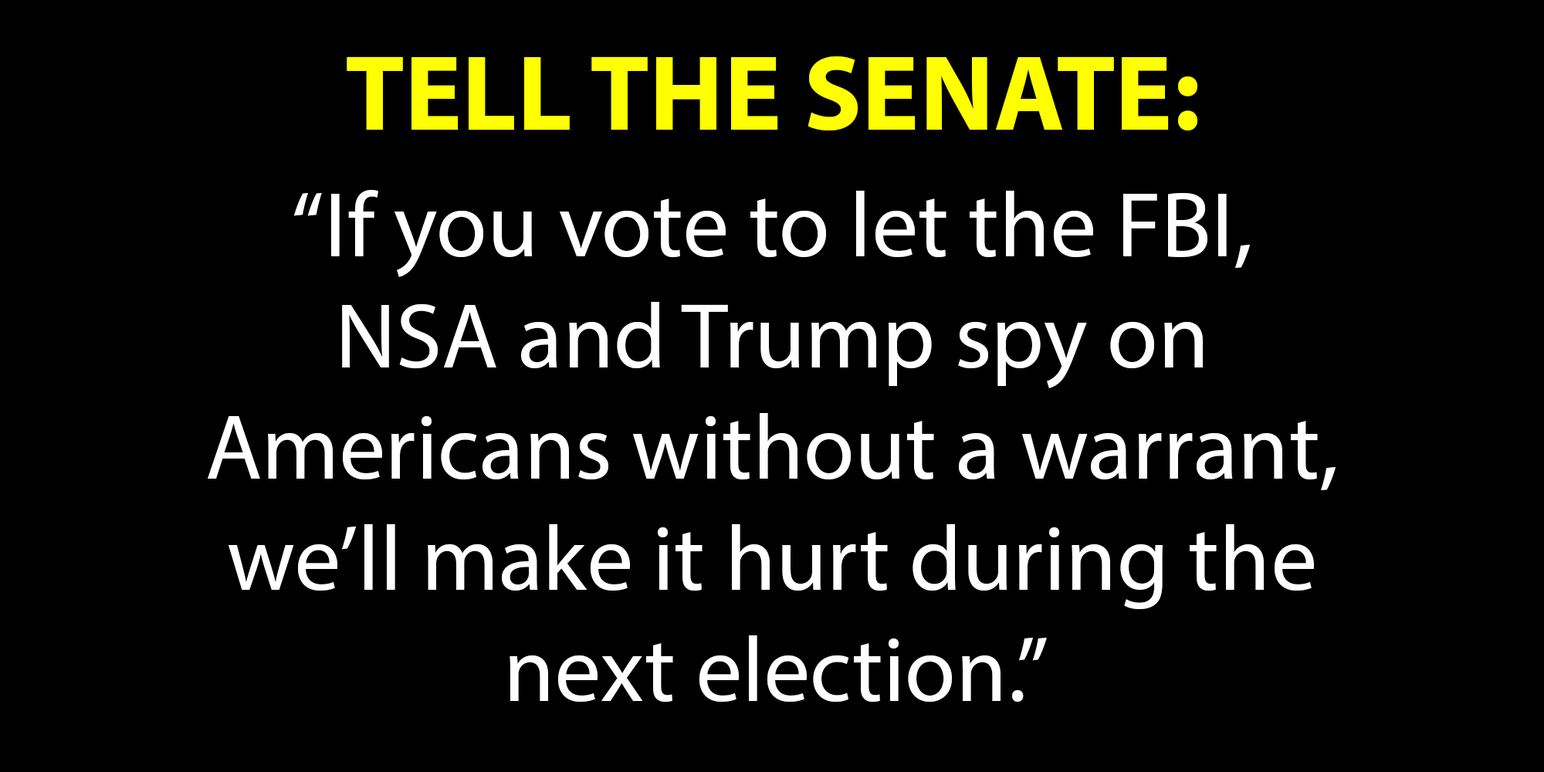
<style>
.page{position:relative;width:1544px;height:772px;background:#000000}
.page>*{position:absolute;margin:0}
.t1{font:108.1px "MyriadPro-Bold";color:#ffff00}
.t2{font:92.7px "MyriadPro-Regular";color:#ffffff}
</style>
<div class="page">
<p class="t1" style="left:347px;top:56px;width:851px;height:74px">TELL THE SENATE:</p>
<p class="t2" style="left:208px;top:190px;width:1128px;height:513px;text-align:center">“If you vote to let the FBI,<br>NSA and Trump spy on<br>Americans without a warrant,<br>we’ll make it hurt during the<br>next election.”</p>
</div>
